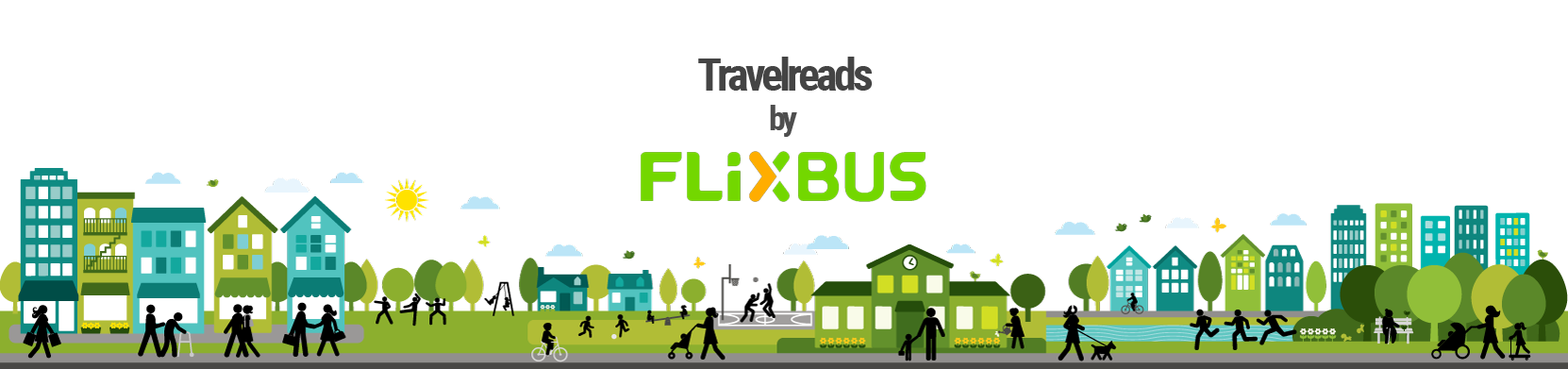
<style>
.page{position:relative;width:1568px;height:369px;background:#ffffff}
.page>*{position:absolute;margin:0}
.t1{font:45.3px "RobotoCondensed-Bold";letter-spacing:-0.08em;color:#444444}
.t2{font:33.9px "RobotoCondensed-Bold";letter-spacing:-0.08em;color:#444444}
</style>
<div class="page">
<p class="t1" style="left:698px;top:57px;width:175px;height:34px">Travelreads</p>
<p class="t2" style="left:770px;top:105px;width:27px;height:32px;opacity:0.95">by</p>
</div>
